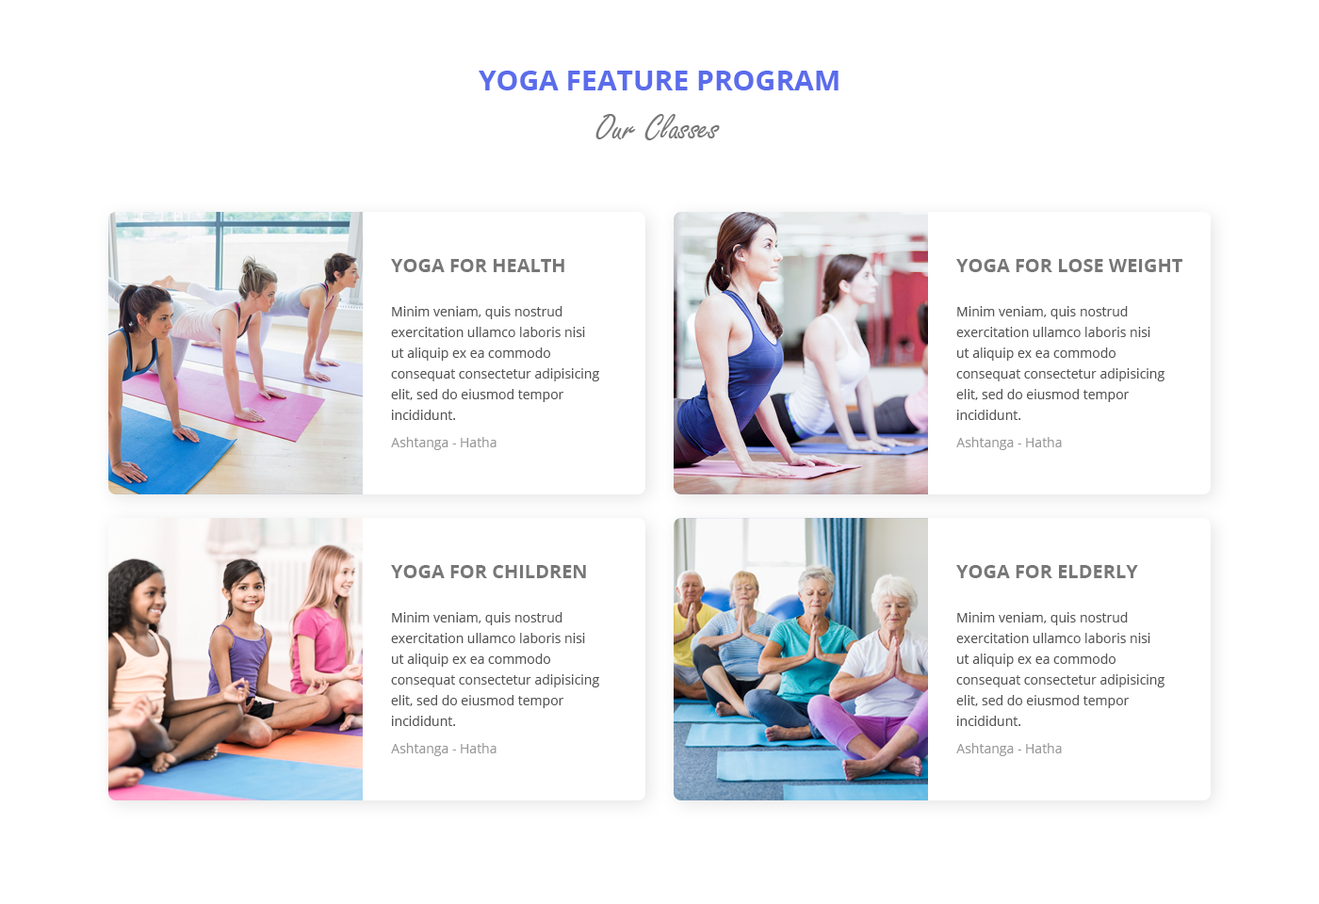
<style>
.page{position:relative;width:1319px;height:904px;background:#ffffff}
.page>*{position:absolute;margin:0}
.t1{font:28.3px "OpenSans-Bold";color:#5b6ceb;text-transform:uppercase}
.t2{font:38.6px "FreestyleScript-Regular";color:#777777}
.t3{font:18.8px "OpenSans-Bold";color:#777777;text-transform:uppercase}
.t4{font:13.2px/20.7px "OpenSans";color:#555555}
.t5{font:13.2px "OpenSans";color:#999999}
</style>
<div class="page">
<p class="t1" style="left:478px;top:71px;width:360px;height:19px">Yoga FEATURE PROGRAM</p>
<p class="t2" style="left:595px;top:114px;width:125px;height:26px">Our Classes</p>
<p class="t3" style="left:391px;top:259px;width:173px;height:13px">Yoga For Health</p>
<p class="t3" style="left:956px;top:259px;width:226px;height:13px">Yoga For Lose Weight</p>
<p class="t4" style="left:391px;top:306px;width:208px;height:114px">Minim veniam, quis nostrud exercitation ullamco laboris nisi ut aliquip ex ea commodo consequat consectetur adipisicing elit, sed do eiusmod tempor incididunt.</p>
<p class="t4" style="left:956px;top:306px;width:208px;height:114px">Minim veniam, quis nostrud exercitation ullamco laboris nisi ut aliquip ex ea commodo consequat consectetur adipisicing elit, sed do eiusmod tempor incididunt.</p>
<p class="t5" style="left:391px;top:437px;width:105px;height:13px">Ashtanga - Hatha</p>
<p class="t5" style="left:956px;top:437px;width:106px;height:13px">Ashtanga - Hatha</p>
<p class="t3" style="left:391px;top:565px;width:195px;height:13px">Yoga For Children</p>
<p class="t3" style="left:956px;top:565px;width:182px;height:13px">Yoga For Elderly</p>
<p class="t4" style="left:391px;top:612px;width:208px;height:114px">Minim veniam, quis nostrud exercitation ullamco laboris nisi ut aliquip ex ea commodo consequat consectetur adipisicing elit, sed do eiusmod tempor incididunt.</p>
<p class="t4" style="left:956px;top:612px;width:208px;height:114px">Minim veniam, quis nostrud exercitation ullamco laboris nisi ut aliquip ex ea commodo consequat consectetur adipisicing elit, sed do eiusmod tempor incididunt.</p>
<p class="t5" style="left:391px;top:743px;width:105px;height:13px">Ashtanga - Hatha</p>
<p class="t5" style="left:956px;top:743px;width:106px;height:13px">Ashtanga - Hatha</p>
</div>
